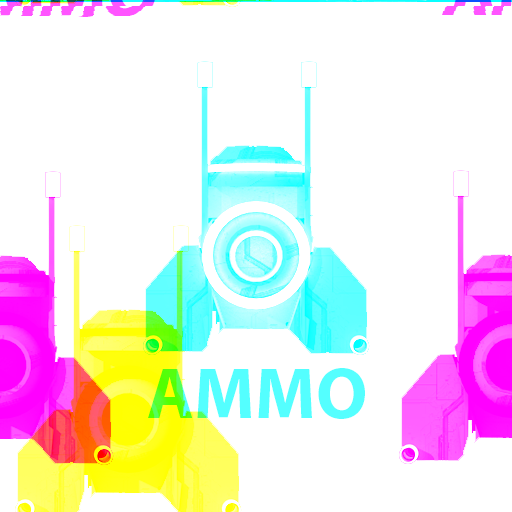
<style>
.page{position:relative;width:512px;height:512px;background:#ffffff}
.page>*{position:absolute;margin:0}
.t1{font:72px "MyriadPro-Bold";color:#54ffff}
</style>
<div class="page">
<p class="t1" style="left:148px;top:366px;width:217px;height:51px">AMMO</p>
</div>
